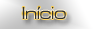
<style>
.page{position:relative;width:94px;height:29px}
.page>*{position:absolute;margin:0}
.t1{font:18px "MicrogrammaD-MediExte";color:#313131}
</style>
<div class="page">
<p class="t1" style="left:22px;top:6px;width:44px;height:13px">Início</p>
</div>
